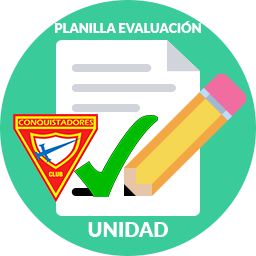
<style>
.page{position:relative;width:256px;height:256px;background:#ffffff}
.page>*{position:absolute;margin:0}
.t1{font:13px "Lato-Black";color:#ffffff}
.t2{font:20px "Lato-Black";color:#ffffff}
</style>
<div class="page">
<p class="t1" style="left:55px;top:21px;width:146px;height:12px">PLANILLA EVALUACIÓN</p>
<p class="t2" style="left:88px;top:222px;width:80px;height:15px">UNIDAD</p>
</div>
